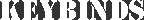
<style>
.page{position:relative;width:144px;height:20px;background:#ffffff}
.page>*{position:absolute;margin:0}
.t1{font:30px "Stencil";color:#ffffff}
</style>
<div class="page">
<p class="t1" style="left:0px;top:0px;width:144px;height:20px">KEYBINDS</p>
</div>
